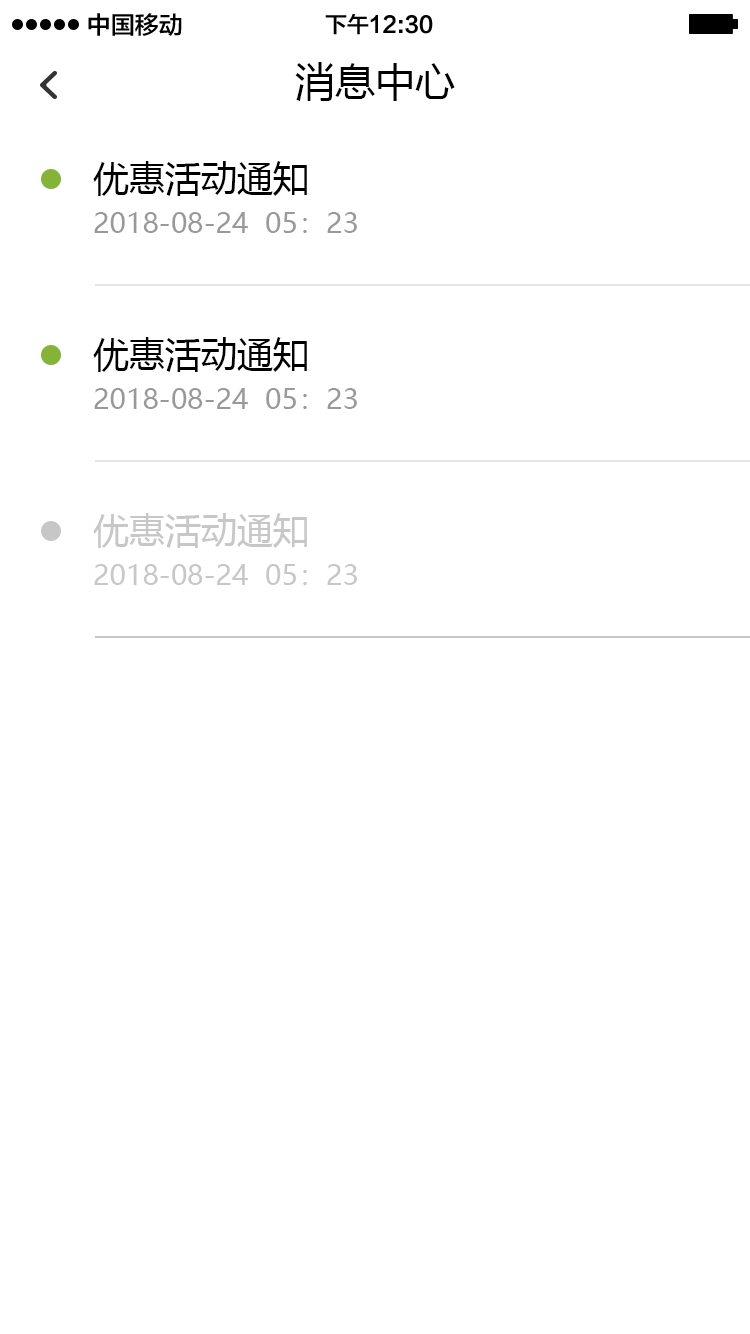
<style>
.page{position:relative;width:750px;height:1334px;background:#ffffff}
.page>*{position:absolute;margin:0}
.t1{font:24px "FZLTZHK--GBK1-0";color:#000000}
.t2{font:22px "FZLTZHK--GBK1-0";color:#000000}
.t3{font:40px "MicrosoftYaHei";color:#000000}
.t4{font:36px "MicrosoftYaHei";color:#000000}
.t5{font:28px "MicrosoftYaHei";color:#999999}
.t6{font:36px "MicrosoftYaHei";color:#c7c7c7}
.t7{font:28px "MicrosoftYaHei";color:#c7c7c7}
</style>
<div class="page">
<p class="t1" style="left:88px;top:13px;width:94px;height:23px">中国移动</p>
<p class="t2" style="left:325px;top:14px;width:108px;height:21px">下午12:30</p>
<p class="t3" style="left:295px;top:62px;width:160px;height:39px">消息中心</p>
<p class="t4" style="left:93px;top:161px;width:214px;height:35px">优惠活动通知</p>
<p class="t5" style="left:94px;top:212px;width:263px;height:21px">2018-08-24  05：23</p>
<p class="t4" style="left:93px;top:337px;width:214px;height:35px">优惠活动通知</p>
<p class="t5" style="left:94px;top:388px;width:263px;height:21px">2018-08-24  05：23</p>
<p class="t6" style="left:93px;top:513px;width:214px;height:35px">优惠活动通知</p>
<p class="t7" style="left:94px;top:564px;width:263px;height:21px">2018-08-24  05：23</p>
</div>
